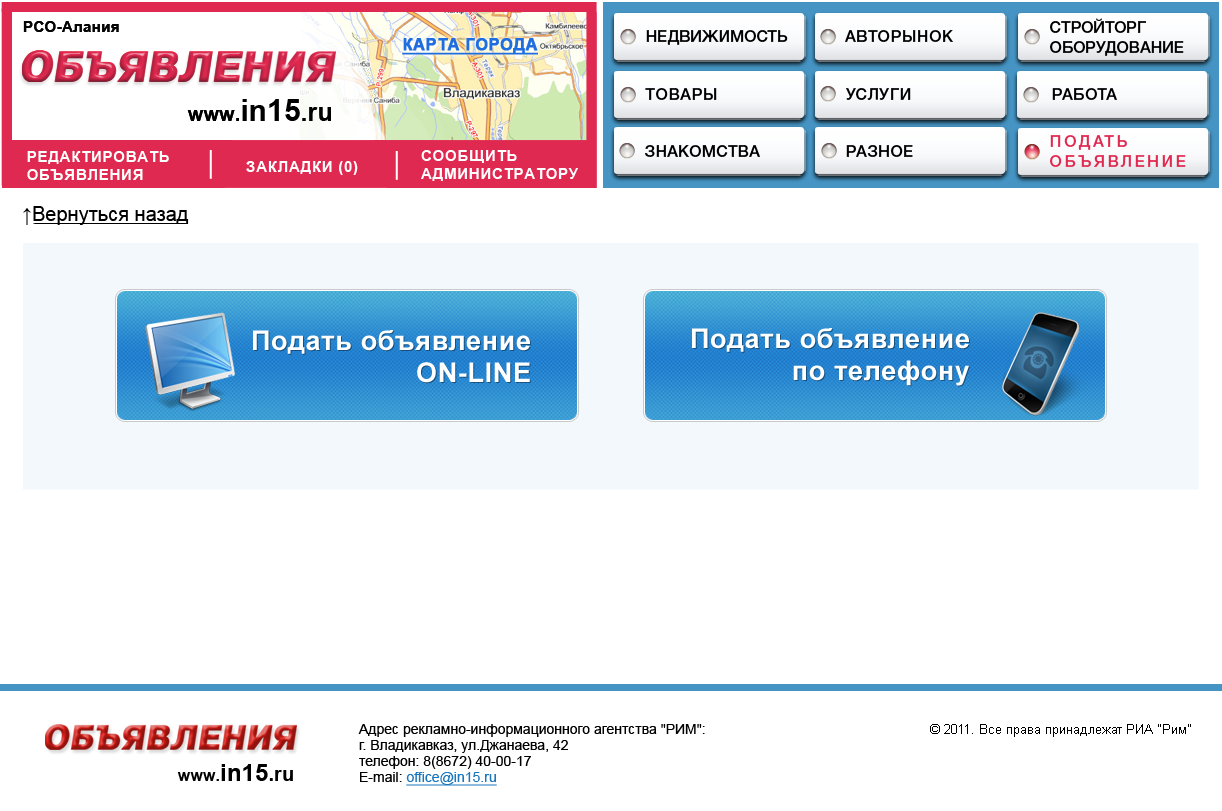
<style>
.page{position:relative;width:1222px;height:811px;background:#ffffff}
.page>*{position:absolute;margin:0}
.t1{font:16px "HelveticaNeueCyr-Medium";color:#000000;text-transform:uppercase}
.t2{font:16px "HelveticaNeueCyr-Medium";letter-spacing:0.04em;color:#000000;text-transform:uppercase}
.t3{font:16px/5px "HelveticaNeueCyr-Medium";color:#000000;text-transform:uppercase}
.t4{font:16px/5px "HelveticaNeueCyr-Medium";letter-spacing:0.16em;color:#e02950;text-transform:uppercase}
.t5{font:16px "HelveticaNeueCyr-Medium";letter-spacing:0.02em;color:#000000;text-transform:uppercase}
.t6{font:20px "ArialMT";color:#000000}
.t7{font:27px/32px "Arial-BoldMT";letter-spacing:0.025em;color:#ffffff}
.t8{font:14px/1px "ArialMT";color:#000000}
.t9{font:14px/1px "ArialMT";color:#1a77be;text-decoration:underline}
.t10{font:13px "ArialMT";color:#000000}
.t11{font:16.1px "Arial-BoldMT";color:#000000}
.t12{font:24.2px "Arial-BoldMT";color:#000000}
.t13{font:20.2px "Arial-BoldMT";color:#000000}
</style>
<div class="page">
<p class="t1" style="left:646px;top:30px;width:142px;height:15px">Недвижимость</p>
<p class="t2" style="left:845px;top:30px;width:108px;height:12px">Авторынок</p>
<p class="t3" style="left:1050px;top:18px;width:134px;height:38px">Стройторг<br>Оборудование</p>
<p class="t2" style="left:645px;top:88px;width:72px;height:12px">товары</p>
<p class="t2" style="left:846px;top:88px;width:65px;height:12px">Услуги</p>
<p class="t2" style="left:1052px;top:88px;width:65px;height:12px">работа</p>
<p class="t4" style="left:1050px;top:135px;width:136px;height:32px">Подать<br>Объявление</p>
<p class="t5" style="left:645px;top:145px;width:115px;height:12px">Знакомства</p>
<p class="t2" style="left:846px;top:145px;width:67px;height:12px">Разное</p>
<p class="t6" style="left:23px;top:206px;width:166px;height:19px">↑Вернуться назад</p>
<p class="t7" style="left:692px;top:328px;width:277px;height:58px;text-align:right">Подать объявление<br>по телефону</p>
<p class="t7" style="left:253px;top:330px;width:277px;height:53px;text-align:right">Подать объявление<br>ON-LINE</p>
<p class="t8" style="left:358px;top:724px;width:347px;height:62px">Адрес рекламно-информационного агентства "РИМ":<br>г. Владикавказ, ул.Джанаева, 42<br>телефон: 8(8672) 40-00-17<br>E-mail: <span class="t9">office@in15.ru</span></p>
<p class="t10" style="left:930px;top:724px;width:261px;height:13px">© 2011. Все права принадлежат РИА "Рим”</p>
<p class="t11" style="left:177px;top:764px;width:116px;height:17px">www.<span class="t12">in15</span><span class="t13">.ru</span></p>
</div>
